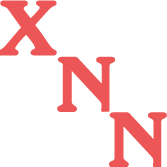
<style>
.page{position:relative;width:167px;height:167px;background:#ffffff}
.page>*{position:absolute;margin:0}
.t1{font:72px "Windsor-Bold";letter-spacing:-0.03em;color:#ec5656}
</style>
<div class="page">
<p class="t1" style="left:57px;top:56px;width:59px;height:56px">N</p>
<p class="t1" style="left:109px;top:112px;width:58px;height:56px">N</p>
</div>
